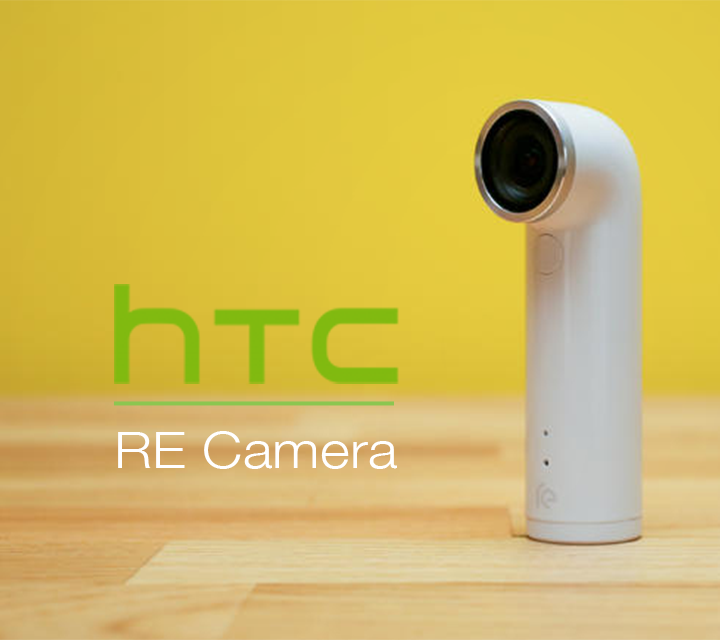
<style>
.page{position:relative;width:720px;height:640px}
.page>*{position:absolute;margin:0}
.t1{font:49.9px "HelveticaNeue-Light";color:#ffffff;scale:1.15 1}
</style>
<div class="page">
<p class="t1" style="left:118px;top:431px;width:279px;height:38px">RE Camera</p>
</div>
